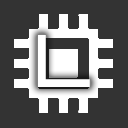
<style>
.page{position:relative;width:128px;height:128px;background:#333333}
.page>*{position:absolute;margin:0}
.t1{font:72px "Orbitron-Medium";color:#ffffff}
</style>
<div class="page">
<p class="t1" style="left:38px;top:35px;width:52px;height:52px">L</p>
</div>
